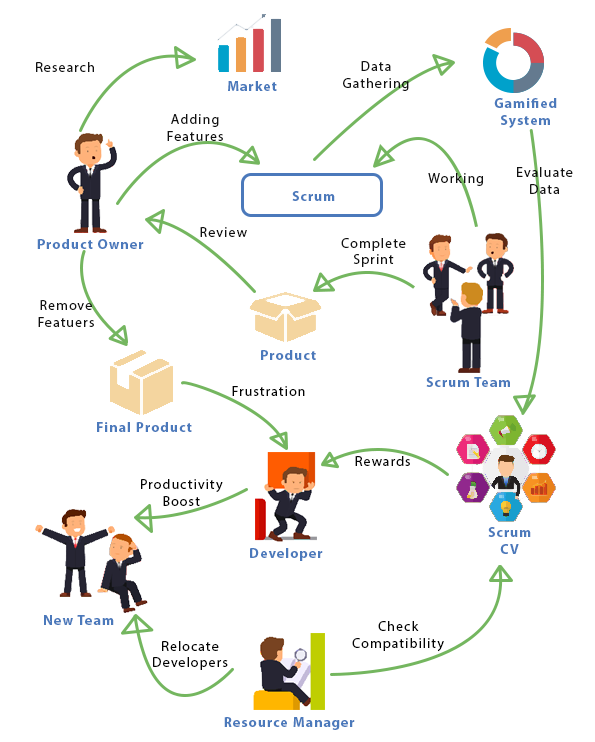
<style>
.page{position:relative;width:595px;height:742px;background:#ffffff}
.page>*{position:absolute;margin:0}
.t1{font:14px "MyriadPro-Regular";letter-spacing:0.075em;color:#111111}
.t2{font:14px "MyriadPro-Bold";letter-spacing:0.075em;color:#4b79bb}
.t3{font:14px "MyriadPro-Regular";letter-spacing:0.075em;color:#020202}
</style>
<div class="page">
<p class="t1" style="left:36px;top:62px;width:58px;height:10px">Research</p>
<p class="t1" style="left:343px;top:61px;width:66px;height:30px;text-align:center">Data<br>Gathering</p>
<p class="t2" style="left:228px;top:81px;width:49px;height:10px">Market</p>
<p class="t2" style="left:494px;top:98px;width:63px;height:30px;text-align:center">Gamified<br>System</p>
<p class="t1" style="left:167px;top:114px;width:56px;height:27px;text-align:center">Adding<br>Features</p>
<p class="t1" style="left:428px;top:173px;width:55px;height:13px">Working</p>
<p class="t1" style="left:517px;top:167px;width:56px;height:27px;text-align:center">Evaluate<br>Data</p>
<p class="t2" style="left:292px;top:191px;width:43px;height:10px">Scrum</p>
<p class="t1" style="left:200px;top:227px;width:47px;height:10px">Review</p>
<p class="t2" style="left:37px;top:239px;width:107px;height:10px">Product Owner</p>
<p class="t1" style="left:341px;top:238px;width:65px;height:29px;text-align:center">Complete<br>Sprint</p>
<p class="t1" style="left:38px;top:300px;width:56px;height:27px;text-align:center">Remove<br>Featuers</p>
<p class="t2" style="left:261px;top:350px;width:55px;height:10px">Product</p>
<p class="t2" style="left:426px;top:377px;width:84px;height:10px">Scrum Team</p>
<p class="t3" style="left:232px;top:386px;width:73px;height:10px">Frustration</p>
<p class="t2" style="left:97px;top:422px;width:95px;height:10px">Final Product</p>
<p class="t3" style="left:355px;top:456px;width:55px;height:10px">Rewards</p>
<p class="t3" style="left:141px;top:479px;width:82px;height:27px;text-align:center">Productivity<br>Boost</p>
<p class="t2" style="left:488px;top:527px;width:43px;height:27px;text-align:center">Scrum<br>CV</p>
<p class="t2" style="left:250px;top:548px;width:73px;height:13px">Developer</p>
<p class="t2" style="left:44px;top:615px;width:70px;height:10px">New Team</p>
<p class="t3" style="left:352px;top:621px;width:92px;height:31px;text-align:center">Check<br>Compatibility</p>
<p class="t3" style="left:153px;top:641px;width:75px;height:29px;text-align:center">Relocate<br>Developers</p>
<p class="t2" style="left:224px;top:717px;width:131px;height:13px">Resource Manager</p>
</div>
